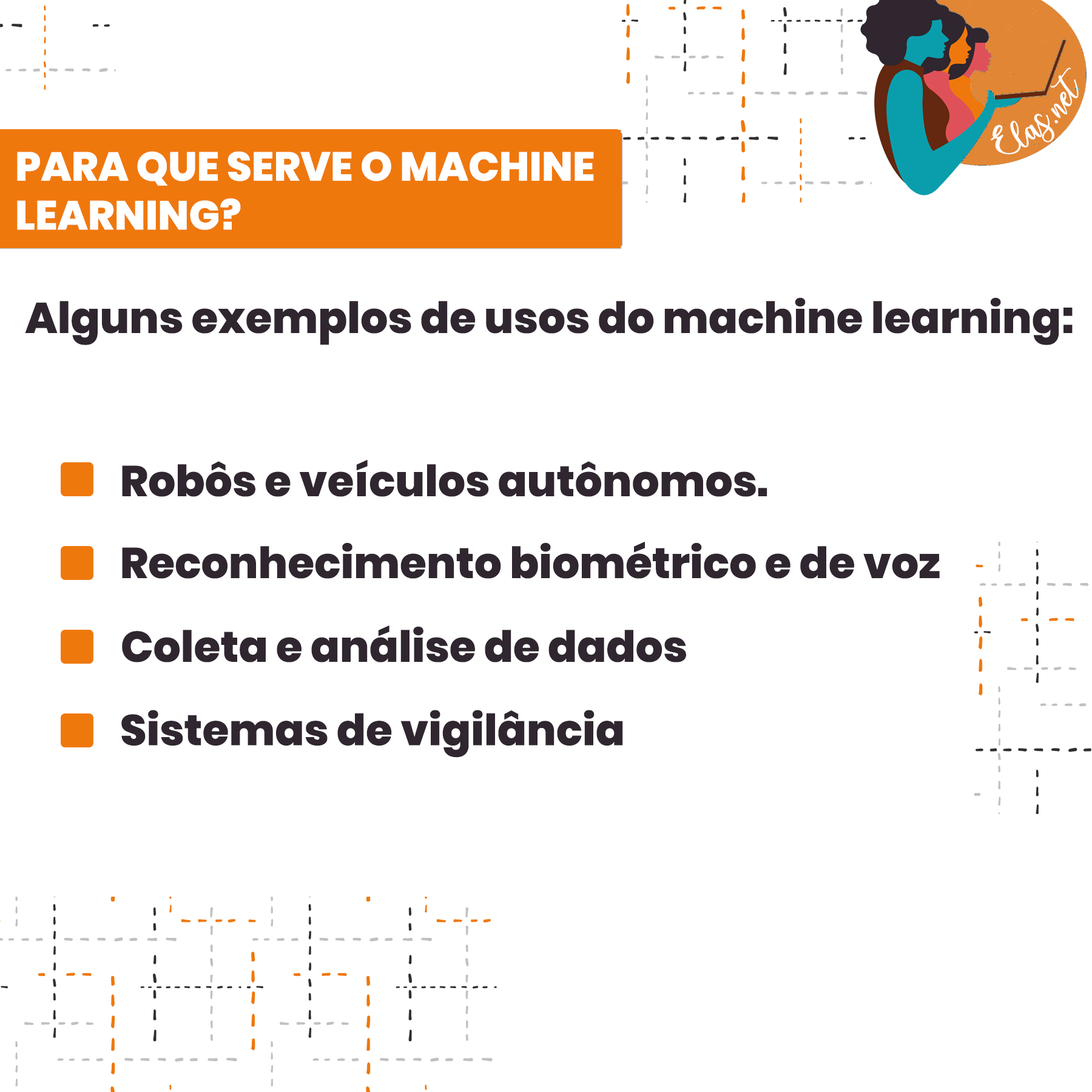
<style>
.page{position:relative;width:1092px;height:1092px;background:#ffffff}
.page>*{position:absolute;margin:0}
.t1{font:25px "charlinda-Regular";color:#ffffff;scale:1.18 1}
.t2{font:40.6px "Poppins-ExtraBold";color:#ffffff;text-transform:uppercase}
.t3{font:43.1px "Poppins-ExtraBold";color:#2f262f}
</style>
<div class="page">
<p class="t1" style="left:991px;top:67px;width:88px;height:88px;rotate:-42deg">Elas.net</p>
<p class="t2" style="left:17px;top:151px;width:577px;height:79px">Para que serve o machine<br>learning?</p>
<p class="t3" style="left:25px;top:297px;width:1048px;height:48px">Alguns exemplos de usos do machine learning:</p>
<p class="t3" style="left:122px;top:460px;width:645px;height:37px">Robôs e veículos autônomos.</p>
<p class="t3" style="left:122px;top:542px;width:818px;height:37px">Reconhecimento biométrico e de voz</p>
<p class="t3" style="left:122px;top:625px;width:564px;height:37px">Coleta e análise de dados</p>
<p class="t3" style="left:121px;top:710px;width:502px;height:48px">Sistemas de vigilância</p>
</div>
